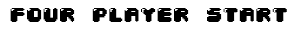
<style>
.page{position:relative;width:300px;height:30px;background:#ffffff}
.page>*{position:absolute;margin:0}
.t1{font:20px "04b30";color:#000000}
</style>
<div class="page">
<p class="t1" style="left:10px;top:8px;width:277px;height:14px">four player start</p>
</div>
